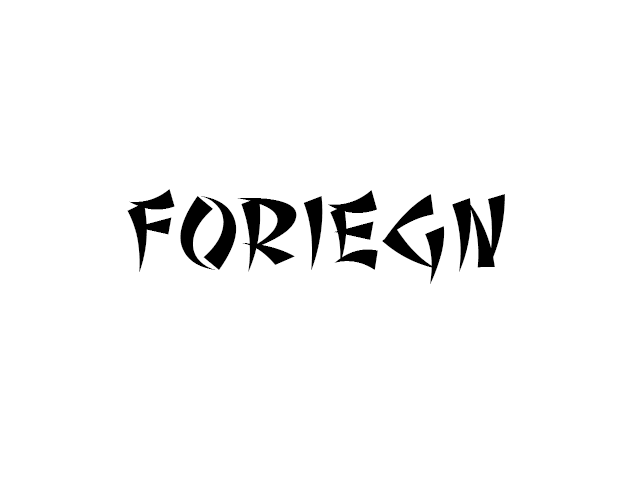
<style>
.page{position:relative;width:640px;height:480px;background:#ffffff}
.page>*{position:absolute;margin:0}
.t1{font:100px "SevenMonkeyFuryBB";color:#000000}
</style>
<div class="page">
<p class="t1" style="left:127px;top:189px;width:378px;height:95px">Foriegn</p>
</div>
